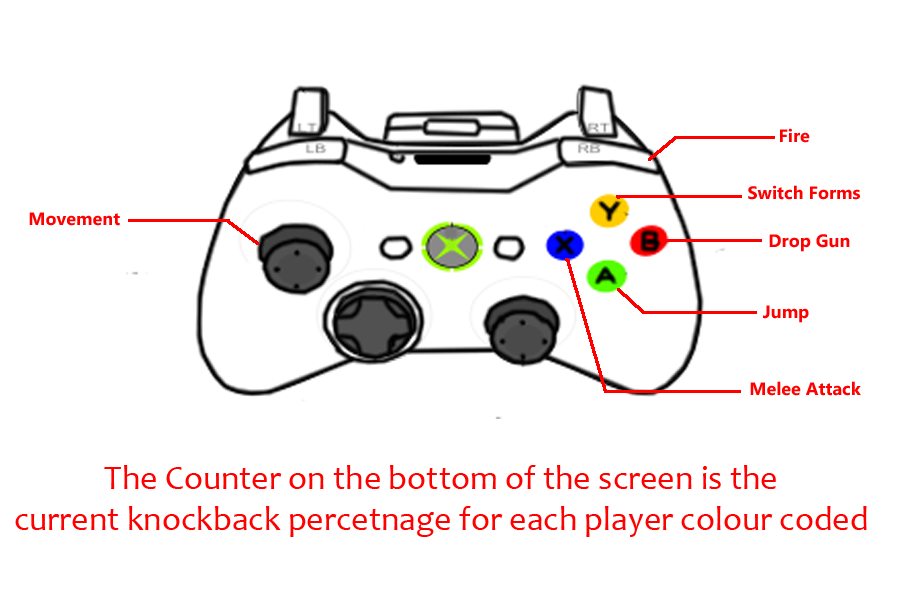
<style>
.page{position:relative;width:900px;height:600px;background:#ffffff}
.page>*{position:absolute;margin:0}
.t1{font:18px "MicrosoftPhagsPa-Bold";color:#ff0000}
.t2{font:34px "Candara";color:#ff0000}
</style>
<div class="page">
<p class="t1" style="left:780px;top:128px;width:30px;height:15px">Fire</p>
<p class="t1" style="left:748px;top:185px;width:112px;height:15px">Switch Forms</p>
<p class="t1" style="left:29px;top:212px;width:91px;height:14px">Movement</p>
<p class="t1" style="left:769px;top:234px;width:81px;height:18px">Drop Gun</p>
<p class="t1" style="left:763px;top:305px;width:46px;height:18px">Jump</p>
<p class="t1" style="left:750px;top:381px;width:111px;height:15px">Melee Attack</p>
<p class="t2" style="left:15px;top:465px;width:852px;height:72px;text-align:center">The Counter on the bottom of the screen is the<br>current knockback percetnage for each player colour coded</p>
</div>
